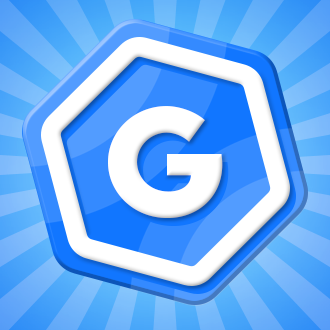
<style>
.page{position:relative;width:330px;height:330px}
.page>*{position:absolute;margin:0}
.t1{font:136.3px "LEMONMILK-Bold";color:#ffffff}
</style>
<div class="page">
<p class="t1" style="left:108px;top:106px;width:115px;height:112px">G</p>
</div>
